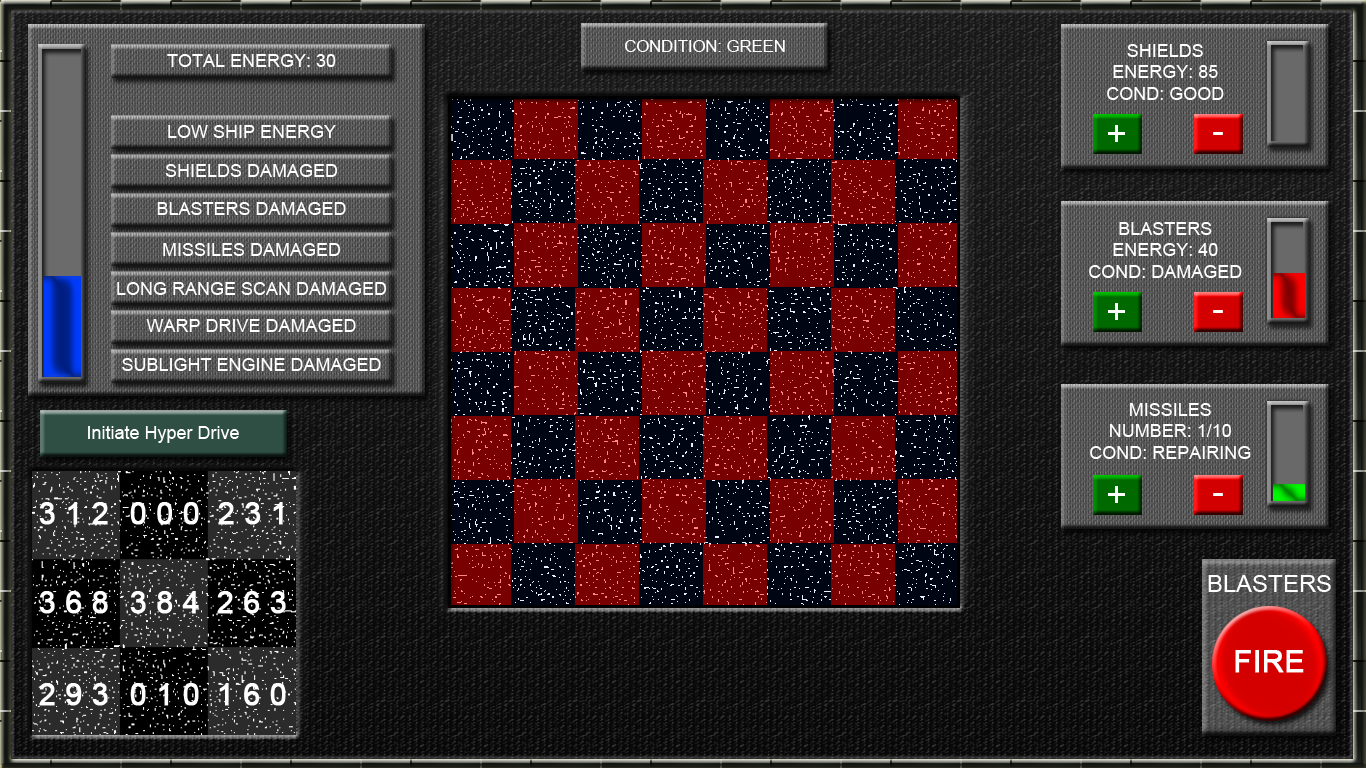
<style>
.page{position:relative;width:1366px;height:768px}
.page>*{position:absolute;margin:0}
.t1{font:16.6px "ArialMT";color:#ffffff}
.t2{font:18px "ArialMT";color:#ffffff}
.t3{font:24px "ArialMT";color:#ffffff}
.t4{font:30px "ArialMT";color:#ffffff;font-weight:bold}
</style>
<div class="page">
<p class="t1" style="left:625px;top:40px;width:160px;height:12px">CONDITION: GREEN</p>
<p class="t2" style="left:167px;top:54px;width:169px;height:13px">TOTAL ENERGY: 30</p>
<p class="t2" style="left:1107px;top:44px;width:117px;height:56px;text-align:center">SHIELDS<br>ENERGY: 85<br>COND: GOOD</p>
<p class="t2" style="left:168px;top:125px;width:168px;height:13px">LOW SHIP ENERGY</p>
<p class="t2" style="left:165px;top:164px;width:173px;height:13px">SHIELDS DAMAGED</p>
<p class="t2" style="left:157px;top:202px;width:189px;height:13px">BLASTERS DAMAGED</p>
<p class="t2" style="left:1089px;top:222px;width:153px;height:56px;text-align:center">BLASTERS<br>ENERGY: 40<br>COND: DAMAGED</p>
<p class="t2" style="left:163px;top:243px;width:178px;height:13px">MISSILES DAMAGED</p>
<p class="t2" style="left:117px;top:282px;width:270px;height:13px">LONG RANGE SCAN DAMAGED</p>
<p class="t2" style="left:146px;top:319px;width:210px;height:13px">WARP DRIVE DAMAGED</p>
<p class="t2" style="left:122px;top:358px;width:259px;height:13px">SUBLIGHT ENGINE DAMAGED</p>
<p class="t2" style="left:1090px;top:403px;width:161px;height:56px;text-align:center">MISSILES<br>NUMBER: 1/10<br>COND: REPAIRING</p>
<p class="t2" style="left:88px;top:426px;width:151px;height:17px">Initiate Hyper Drive</p>
<p class="t3" style="left:1208px;top:575px;width:123px;height:17px">BLASTERS</p>
<p class="t4" style="left:1235px;top:650px;width:69px;height:23px">FIRE</p>
</div>
